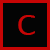
<style>
.page{position:relative;width:50px;height:50px;background:#040404}
.page>*{position:absolute;margin:0}
.t1{font:27.6px "LucidaGrande";color:#c70505}
</style>
<div class="page">
<p class="t1" style="left:18px;top:15px;width:17px;height:20px">C</p>
</div>
